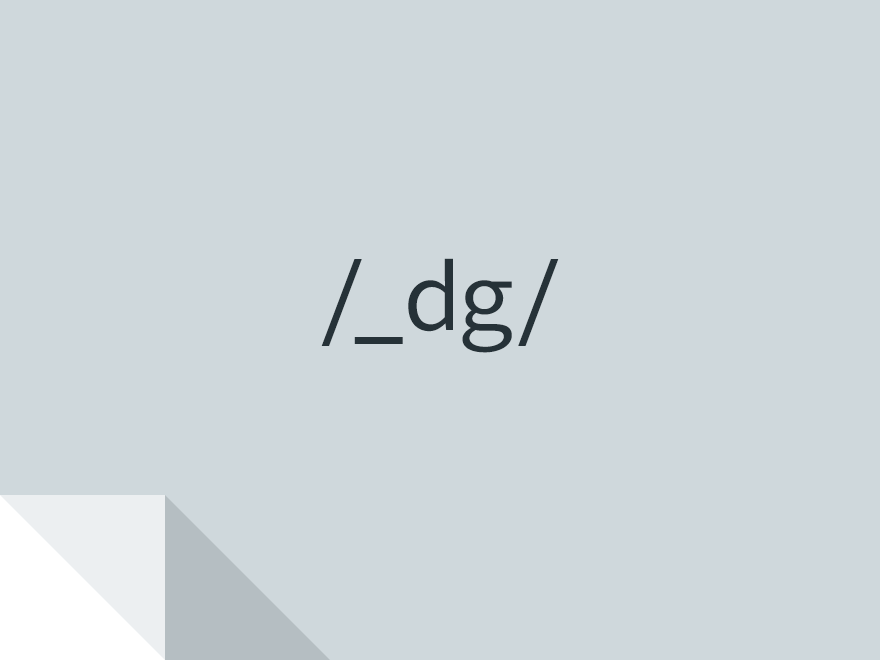
<style>
.page{position:relative;width:880px;height:660px;background:#cfd8dc}
.page>*{position:absolute;margin:0}
.t1{font:100px "SourceCodePro-Regular";letter-spacing:-0.025em;color:#263238}
</style>
<div class="page">
<p class="t1" style="left:321px;top:258px;width:238px;height:95px">/_dg/</p>
</div>
